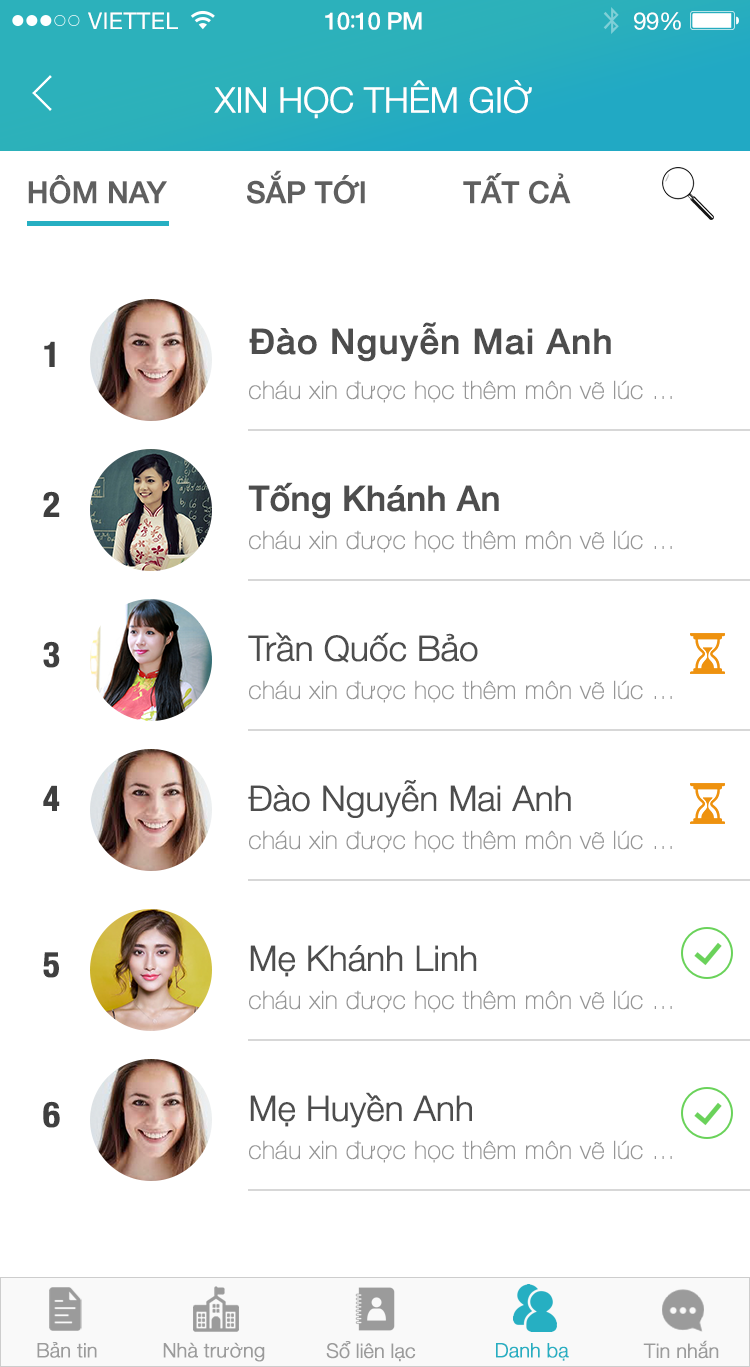
<style>
.page{position:relative;width:750px;height:1367px;background:#ffffff}
.page>*{position:absolute;margin:0}
.t1{font:23px "HelveticaNeue";letter-spacing:0.02em;color:#ffffff}
.t2{font:24px "HelveticaNeue-Medium";letter-spacing:-0.02em;color:#ffffff}
.t3{font:26px "MyriadPro-Regular";letter-spacing:-0.02em;color:#ffffff}
.t4{font:24px "HelveticaNeue";letter-spacing:-0.02em;color:#ffffff}
.t5{font:35px "HelveticaNeue-Light";letter-spacing:-0.02em;color:#ffffff;font-weight:bold}
.t6{font:30px "HelveticaNeue-Medium";letter-spacing:-0.02em;color:#5f5f5f;font-weight:bold}
.t7{font:35px "HelveticaNeue-Medium";letter-spacing:0.01em;color:#4d4d4d;font-weight:bold}
.t8{font:35px "HelveticaNeue-CondensedBold";letter-spacing:0.01em;color:#3f3f3f;font-weight:bold}
.t9{font:25px "HelveticaNeue-UltraLight";letter-spacing:0.01em;color:#959595;font-weight:bold}
.t10{font:35px "HelveticaNeue-Medium";letter-spacing:-0.02em;color:#4d4d4d;font-weight:bold}
.t11{font:35px "HelveticaNeue-Light";letter-spacing:-0.02em;color:#4d4d4d;font-weight:bold}
.t12{font:20px "HelveticaNeue-Light";letter-spacing:-0.02em;color:#9b9b9b;font-weight:bold}
.t13{font:20px "HelveticaNeue-Light";letter-spacing:-0.02em;color:#26afc2;font-weight:bold}
</style>
<div class="page">
<p class="t1" style="left:88px;top:12px;width:90px;height:17px">VIETTEL</p>
<p class="t2" style="left:325px;top:12px;width:97px;height:18px">10<span class="t3">:</span>10 PM</p>
<p class="t4" style="left:634px;top:12px;width:47px;height:18px">99%</p>
<p class="t5" style="left:214px;top:80px;width:318px;height:39px">XIN HỌC THÊM GIỜ</p>
<p class="t6" style="left:247px;top:170px;width:118px;height:34px">SẮP TỚI</p>
<p class="t6" style="left:463px;top:173px;width:108px;height:31px">TẤT CẢ</p>
<p class="t6" style="left:28px;top:175px;width:139px;height:29px">HÔM NAY</p>
<p class="t7" style="left:249px;top:322px;width:362px;height:40px">Đào Nguyễn Mai Anh</p>
<p class="t8" style="left:44px;top:341px;width:11px;height:26px">1</p>
<p class="t9" style="left:249px;top:380px;width:423px;height:23px">cháu xin được học thêm môn vẽ lúc ...</p>
<p class="t10" style="left:248px;top:482px;width:251px;height:37px">Tống Khánh An</p>
<p class="t8" style="left:43px;top:491px;width:17px;height:26px">2</p>
<p class="t9" style="left:249px;top:530px;width:423px;height:23px">cháu xin được học thêm môn vẽ lúc ...</p>
<p class="t8" style="left:43px;top:641px;width:17px;height:27px">3</p>
<p class="t11" style="left:248px;top:632px;width:230px;height:31px">Trần Quốc Bảo</p>
<p class="t9" style="left:249px;top:680px;width:423px;height:23px">cháu xin được học thêm môn vẽ lúc ...</p>
<p class="t8" style="left:43px;top:785px;width:17px;height:26px">4</p>
<p class="t11" style="left:248px;top:779px;width:323px;height:39px">Đào Nguyễn Mai Anh</p>
<p class="t9" style="left:249px;top:830px;width:423px;height:23px">cháu xin được học thêm môn vẽ lúc ...</p>
<p class="t8" style="left:43px;top:952px;width:16px;height:26px">5</p>
<p class="t11" style="left:250px;top:945px;width:227px;height:32px">Mẹ Khánh Linh</p>
<p class="t9" style="left:249px;top:990px;width:423px;height:23px">cháu xin được học thêm môn vẽ lúc ...</p>
<p class="t11" style="left:250px;top:1092px;width:222px;height:36px">Mẹ Huyền Anh</p>
<p class="t8" style="left:43px;top:1101px;width:17px;height:27px">6</p>
<p class="t9" style="left:249px;top:1140px;width:423px;height:23px">cháu xin được học thêm môn vẽ lúc ...</p>
<p class="t12" style="left:37px;top:1342px;width:60px;height:16px">Bản tin</p>
<p class="t12" style="left:163px;top:1342px;width:102px;height:20px">Nhà trường</p>
<p class="t12" style="left:326px;top:1341px;width:90px;height:21px">Sổ liên lạc</p>
<p class="t13" style="left:496px;top:1343px;width:73px;height:18px">Danh bạ</p>
<p class="t12" style="left:643px;top:1340px;width:76px;height:19px">Tin nhắn</p>
</div>
